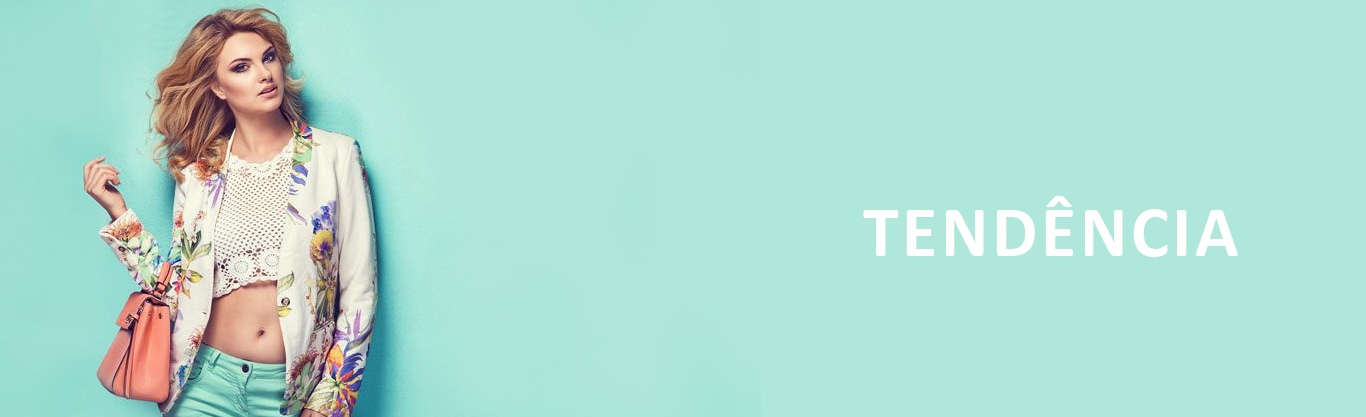
<style>
.page{position:relative;width:1366px;height:417px;background:#afe7da}
.page>*{position:absolute;margin:0}
.t1{font:72px "Calibri-Bold";letter-spacing:0.05em;color:#ffffff}
</style>
<div class="page">
<p class="t1" style="left:863px;top:196px;width:375px;height:61px">TENDÊNCIA</p>
</div>
